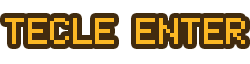
<style>
.page{position:relative;width:250px;height:64px;background:#ffffff}
.page>*{position:absolute;margin:0}
.t1{font:30.3px "pixelmix";color:#fcb824}
</style>
<div class="page">
<p class="t1" style="left:5px;top:18px;width:240px;height:26px">TECLE ENTER</p>
</div>
